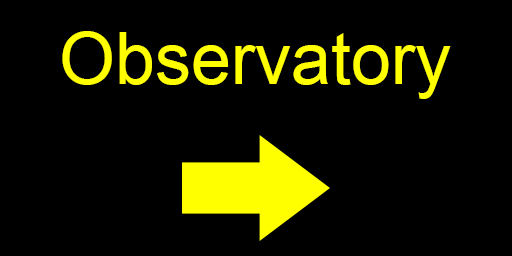
<style>
.page{position:relative;width:512px;height:256px;background:#000000}
.page>*{position:absolute;margin:0}
.t1{font:72px "ArialMT";color:#ffff00}
</style>
<div class="page">
<p class="t1" style="left:62px;top:31px;width:389px;height:68px">Observatory</p>
</div>
